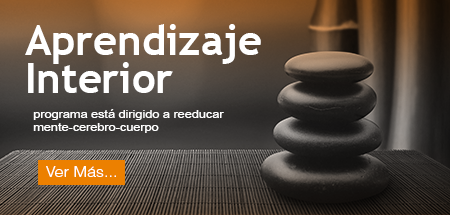
<style>
.page{position:relative;width:450px;height:215px}
.page>*{position:absolute;margin:0}
.t1{font:41.8px/38.4px "TrebuchetMS-Bold";color:#ffffff}
.t2{font:11px "ArialMT";color:#ffffff;scale:1.15 1}
.t3{font:14px "Helvetica-Light";color:#ffffff;scale:1.15 1}
</style>
<div class="page">
<p class="t1" style="left:25px;top:24px;width:236px;height:69px">Aprendizaje<br>Interior</p>
<p class="t2" style="left:33px;top:109px;width:191px;height:24px">programa está dirigido a reeducar <br>mente-cerebro-cuerpo</p>
<p class="t3" style="left:46px;top:166px;width:70px;height:11px">Ver Más...</p>
</div>
